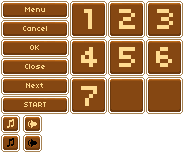
<style>
.page{position:relative;width:184px;height:153px;background:#854712}
.page>*{position:absolute;margin:0}
.t1{font:8px "04b03";color:#ffdb90}
.t2{font:32px "04b03";color:#ffdb90}
</style>
<div class="page">
<p class="t1" style="left:25px;top:7px;width:20px;height:5px">Menu</p>
<p class="t2" style="left:84px;top:9px;width:8px;height:20px">1</p>
<p class="t2" style="left:119px;top:9px;width:16px;height:20px">2</p>
<p class="t2" style="left:157px;top:9px;width:16px;height:20px">3</p>
<p class="t1" style="left:23px;top:26px;width:24px;height:5px">Cancel</p>
<p class="t1" style="left:30px;top:45px;width:9px;height:5px">OK</p>
<p class="t2" style="left:81px;top:47px;width:16px;height:20px">4</p>
<p class="t2" style="left:119px;top:47px;width:16px;height:20px">5</p>
<p class="t2" style="left:156px;top:47px;width:16px;height:20px">6</p>
<p class="t1" style="left:25px;top:64px;width:20px;height:5px">Close</p>
<p class="t1" style="left:26px;top:83px;width:17px;height:5px">Next</p>
<p class="t2" style="left:81px;top:86px;width:16px;height:20px">7</p>
<p class="t1" style="left:24px;top:102px;width:22px;height:5px">START</p>
</div>
